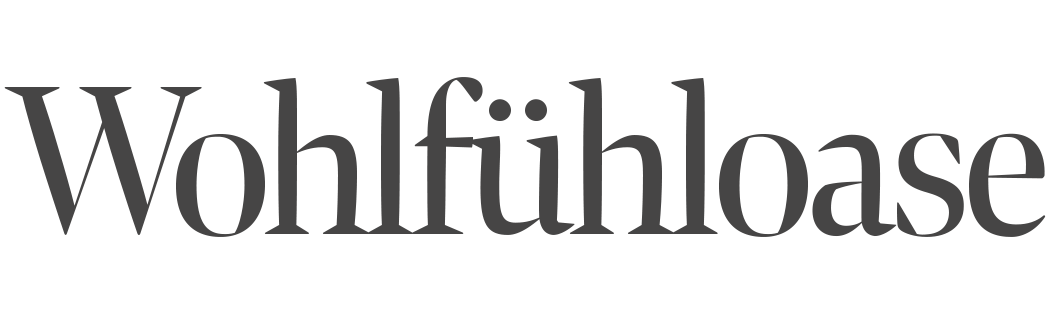
<style>
.page{position:relative;width:1050px;height:334px;background:#ffffff}
.page>*{position:absolute;margin:0}
.t1{font:220.8px "BennetBannerCondensed-Regular";letter-spacing:-0.04em;color:#464545}
</style>
<div class="page">
<p class="t1" style="left:4px;top:77px;width:1042px;height:160px">Wohlfühloase</p>
</div>
